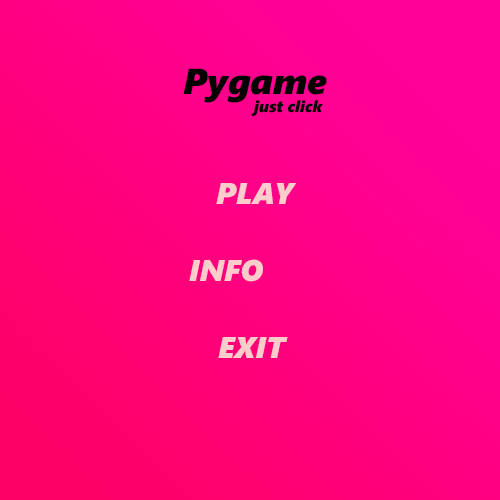
<style>
.page{position:relative;width:500px;height:500px}
.page>*{position:absolute;margin:0}
.t1{font:36px "SegoeUIBlack-Italic";color:#000000}
.t2{font:16px "SegoeUIBlack-Italic";color:#000000}
.t3{font:30px "SegoeUIBlack-Italic";color:#ffcccc}
</style>
<div class="page">
<p class="t1" style="left:183px;top:68px;width:144px;height:35px">Pygame</p>
<p class="t2" style="left:251px;top:100px;width:72px;height:16px">just click</p>
<p class="t3" style="left:216px;top:183px;width:81px;height:21px">PLAY</p>
<p class="t3" style="left:189px;top:259px;width:74px;height:23px">INFO</p>
<p class="t3" style="left:218px;top:337px;width:70px;height:21px">EXIT</p>
</div>
